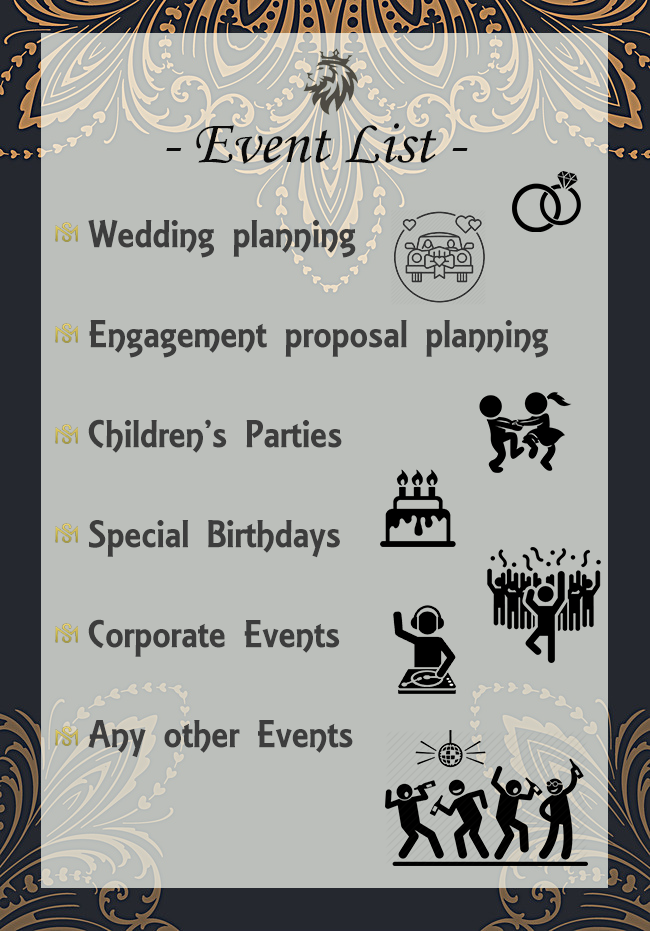
<style>
.page{position:relative;width:650px;height:931px;background:#bcbfbb}
.page>*{position:absolute;margin:0}
.t1{font:62.5px "MonotypeCorsiva";color:#0a0a0a}
.t2{font:41.7px "ARESSENCE";color:#3d3d3d}
</style>
<div class="page">
<p class="t1" style="left:166px;top:123px;width:302px;height:41px">- Event List -</p>
<p class="t2" style="left:88px;top:219px;width:460px;height:539px">Wedding planning<br><br>Engagement proposal planning<br><br>Children’s Parties<br><br>Special Birthdays<br><br>Corporate Events<br><br>Any other Events</p>
</div>
